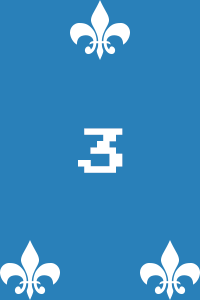
<style>
.page{position:relative;width:200px;height:300px;background:#2980b9}
.page>*{position:absolute;margin:0}
.t1{font:50.4px "PressStart2P-Regular";color:#ffffff}
</style>
<div class="page">
<p class="t1" style="left:78px;top:128px;width:45px;height:45px">3</p>
</div>
